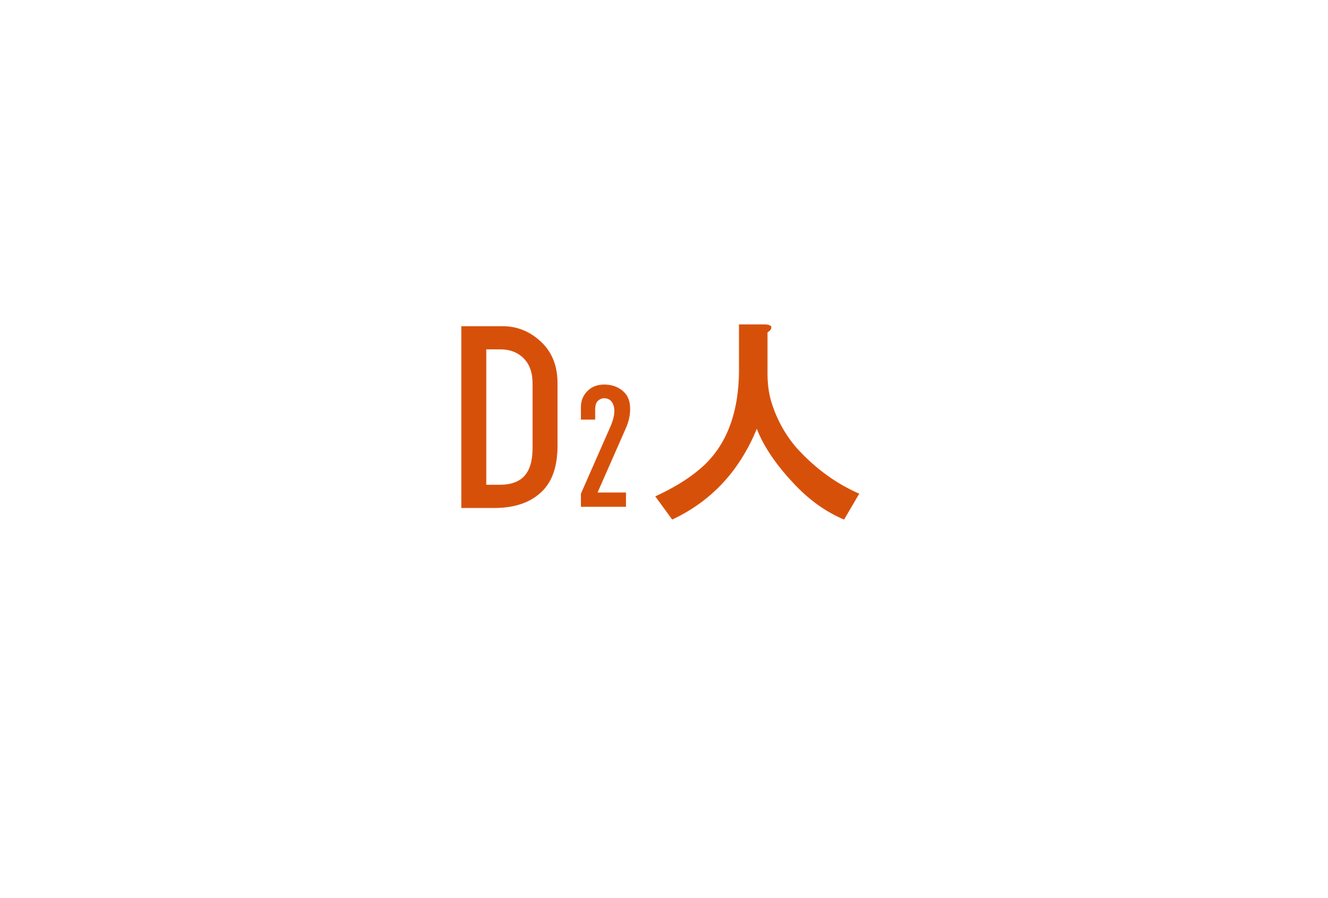
<style>
.page{position:relative;width:1328px;height:898px;background:#ffffff}
.page>*{position:absolute;margin:0}
.t1{font:228px "HGGothicE";color:#d7500a}
.t2{font:152px "HGGothicE";color:#d7500a}
</style>
<div class="page">
<p class="t1" style="left:461px;top:324px;width:399px;height:196px">D<span class="t2">2</span>人</p>
</div>
